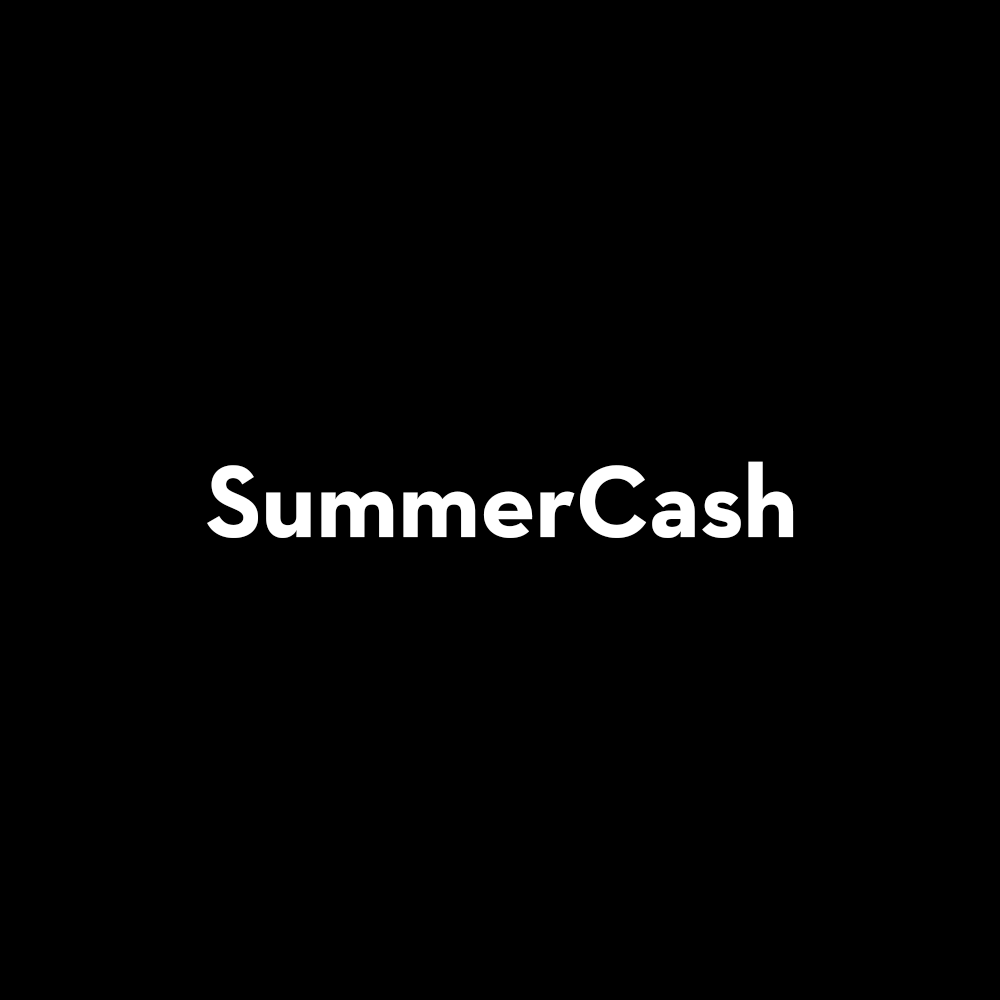
<style>
.page{position:relative;width:1000px;height:1000px;background:#000000}
.page>*{position:absolute;margin:0}
.t1{font:104.2px "NeutraText-Bold";letter-spacing:-0.005em;color:#ffffff}
</style>
<div class="page">
<p class="t1" style="left:207px;top:461px;width:587px;height:77px">SummerCash</p>
</div>
